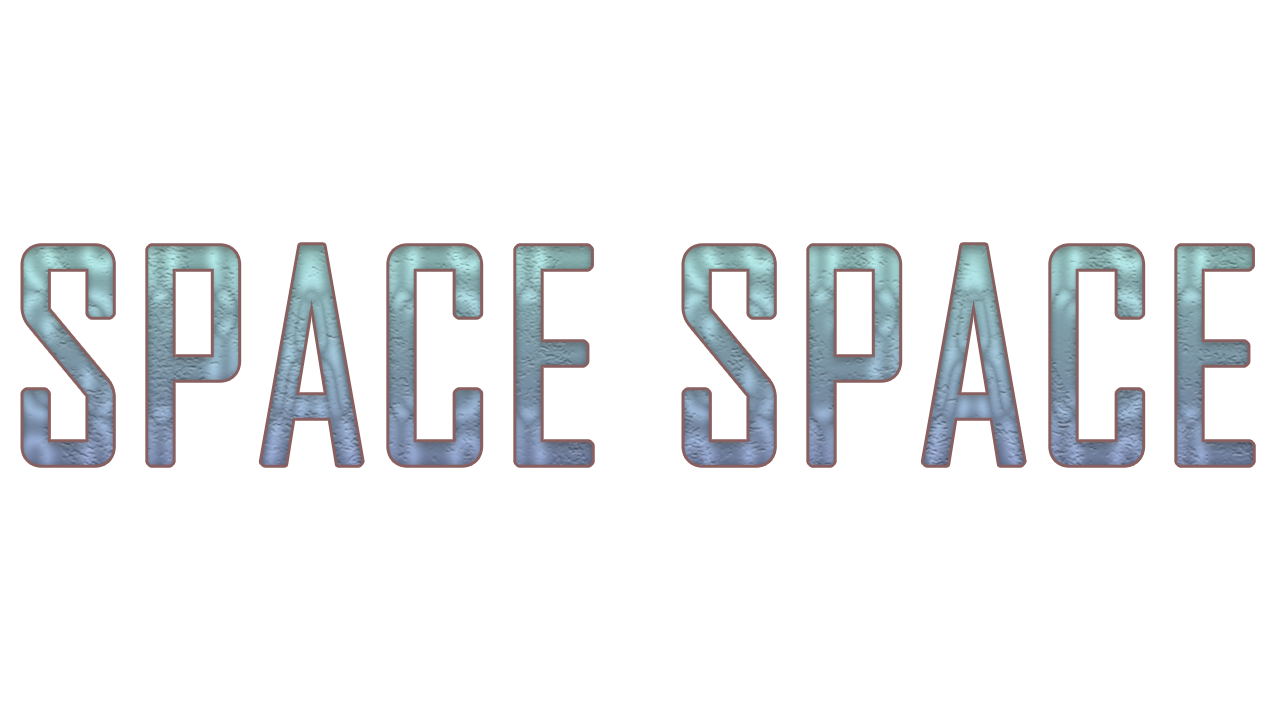
<style>
.page{position:relative;width:1280px;height:720px;background:#ffffff}
.page>*{position:absolute;margin:0}
.t1{font:279.5px "AgencyFB-Reg";font-weight:bold}
</style>
<div class="page">
<p class="t1" style="left:23px;top:245px;width:1230px;height:220px">SPACE SPACE</p>
</div>
